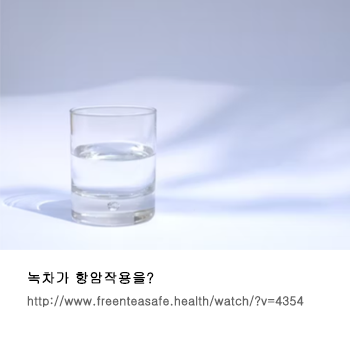
<style>
.page{position:relative;width:350px;height:350px;background:#ffffff}
.page>*{position:absolute;margin:0}
.t1{font:12px/24px "Gulim";letter-spacing:-0.005em;color:#666666;font-weight:bold}
.t2{font:14px/24px "Gulim";letter-spacing:-0.005em;color:#000000;font-weight:bold}
</style>
<div class="page">
<p class="t1" style="left:27px;top:271px;width:277px;height:37px"><span class="t2">녹차가 항암작용을?<br></span>http://www.freenteasafe.health/watch/?v=4354</p>
</div>
